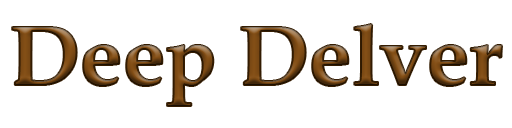
<style>
.page{position:relative;width:512px;height:128px;background:#ffffff}
.page>*{position:absolute;margin:0}
.t1{font:85px "BookAntiqua-Bold"}
</style>
<div class="page">
<p class="t1" style="left:12px;top:24px;width:490px;height:82px">Deep Delver</p>
</div>
